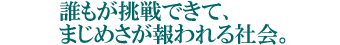
<style>
.page{position:relative;width:340px;height:45px;background:#ffffff}
.page>*{position:absolute;margin:0}
.t1{font:22px "HGPMinchoE";color:#006666}
</style>
<div class="page">
<p class="t1" style="left:60px;top:0px;width:168px;height:22px">誰もが挑戦できて、</p>
<p class="t1" style="left:59px;top:23px;width:227px;height:22px">まじめさが報われる社会。</p>
</div>
